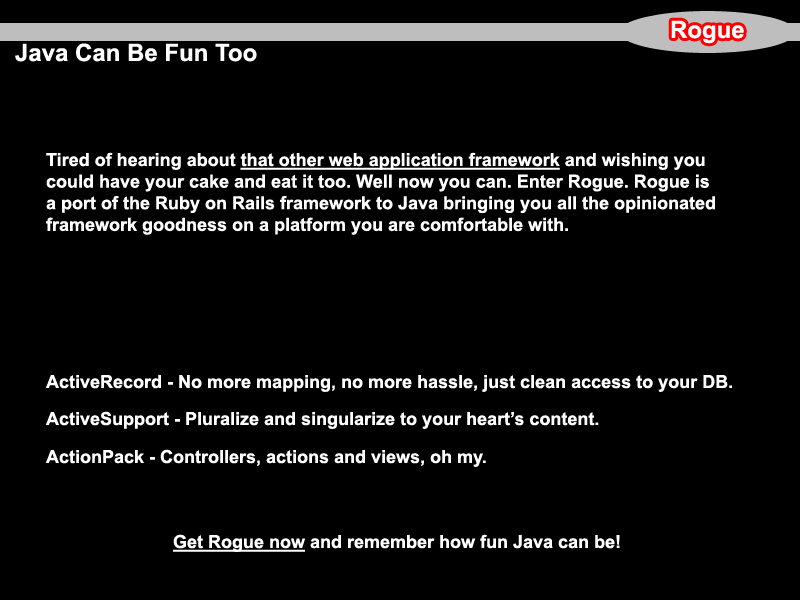
<style>
.page{position:relative;width:800px;height:600px;background:#000000}
.page>*{position:absolute;margin:0}
.t1{font:24px "Arial-BoldMT";color:#ffffff}
.t2{font:18px "Arial-BoldMT";color:#ffffff}
.t3{font:18px "Arial-BoldMT";color:#ffffff;text-decoration:underline}
</style>
<div class="page">
<p class="t1" style="left:671px;top:20px;width:73px;height:24px">Rogue</p>
<p class="t1" style="left:15px;top:43px;width:242px;height:19px">Java Can Be Fun Too</p>
<p class="t2" style="left:46px;top:152px;width:669px;height:83px">Tired of hearing about <span class="t3">that other web application framework</span> and wishing you <br>could have your cake and eat it too. Well now you can. Enter Rogue. Rogue is <br>a port of the Ruby on Rails framework to Java bringing you all the opinionated <br>framework goodness on a platform you are comfortable with.</p>
<p class="t2" style="left:45px;top:375px;width:687px;height:17px">ActiveRecord - No more mapping, no more hassle, just clean access to your DB.</p>
<p class="t2" style="left:45px;top:411px;width:554px;height:18px">ActiveSupport - Pluralize and singularize to your heart’s content.</p>
<p class="t2" style="left:45px;top:449px;width:441px;height:18px">ActionPack - Controllers, actions and views, oh my.</p>
<p class="t2" style="left:173px;top:534px;width:447px;height:18px"><span class="t3">Get Rogue now</span> and remember how fun Java can be!</p>
</div>
